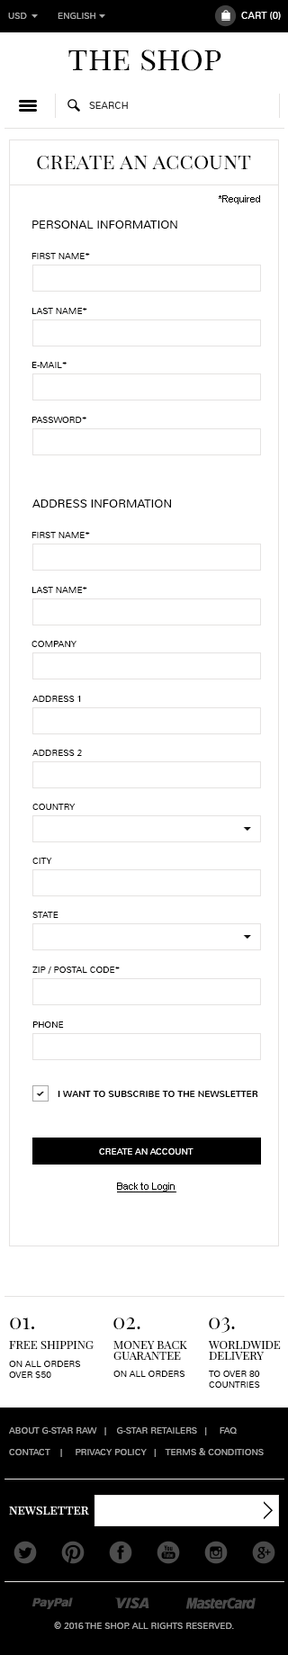
<style>
.page{position:relative;width:288px;height:1655px;background:#ffffff}
.page>*{position:absolute;margin:0}
.t1{font:9px "Nunito-Light";color:#aaaaaa;text-transform:uppercase}
.t2{font:9.9px "Nunito-Light";color:#ffffff;text-transform:uppercase}
.t3{font:32.4px "PlayfairDisplaySC-Regular";color:#000000}
.t4{font:9.9px "Nunito-Light";color:#282828;text-transform:uppercase}
.t5{font:21.6px "PlayfairDisplaySC-Regular";color:#000000}
.t6{font:9.9px "ArialMT";color:#000000}
.t7{font:11.7px "Nunito-Light";color:#000000;text-transform:uppercase}
.t8{font:9px "Nunito-Light";color:#000000;text-transform:uppercase}
.t9{font:9px "Nunito-Regular";color:#000000;text-transform:uppercase}
.t10{font:9px "Nunito-Light";color:#ffffff;text-transform:uppercase}
.t11{font:9.9px "ArialMT";color:#000000;text-decoration:underline}
.t12{font:11.7px "PlayfairDisplaySC-Regular";color:#000000;text-transform:uppercase}
.t13{font:11.7px/10.8px "PlayfairDisplaySC-Regular";color:#000000;text-transform:uppercase}
.t14{font:9px/21.6px "Nunito-Light";color:#aaaaaa;text-transform:uppercase}
.t15{font:12.6px "PlayfairDisplaySC-Regular";color:#ffffff}
</style>
<div class="page">
<p class="t1" style="left:8px;top:13px;width:19px;height:6px">usD</p>
<p class="t1" style="left:58px;top:13px;width:37px;height:6px">English</p>
<p class="t2" style="left:241px;top:12px;width:40px;height:8px">Cart (0)</p>
<p class="t3" style="left:68px;top:50px;width:153px;height:21px">the shop</p>
<p class="t4" style="left:89px;top:102px;width:39px;height:7px">search</p>
<p class="t5" style="left:37px;top:156px;width:214px;height:13px">create an account</p>
<p class="t6" style="left:219px;top:195px;width:41px;height:9px">*Required</p>
<p class="t7" style="left:32px;top:220px;width:145px;height:9px">personal information</p>
<p class="t8" style="left:32px;top:253px;width:58px;height:6px">first name*</p>
<p class="t8" style="left:32px;top:308px;width:55px;height:6px">last name*</p>
<p class="t8" style="left:32px;top:362px;width:35px;height:6px">e-mail*</p>
<p class="t8" style="left:32px;top:417px;width:54px;height:6px">password*</p>
<p class="t7" style="left:32px;top:500px;width:139px;height:8px">address information</p>
<p class="t8" style="left:32px;top:532px;width:58px;height:6px">first name*</p>
<p class="t8" style="left:32px;top:587px;width:55px;height:6px">last name*</p>
<p class="t8" style="left:32px;top:641px;width:44px;height:6px">company</p>
<p class="t8" style="left:32px;top:696px;width:49px;height:6px">Address 1</p>
<p class="t8" style="left:32px;top:750px;width:50px;height:6px">address 2</p>
<p class="t8" style="left:32px;top:804px;width:43px;height:6px">country</p>
<p class="t8" style="left:32px;top:858px;width:20px;height:6px">city</p>
<p class="t8" style="left:32px;top:912px;width:26px;height:6px">state</p>
<p class="t8" style="left:32px;top:967px;width:88px;height:7px">zip / postal code*</p>
<p class="t8" style="left:32px;top:1022px;width:32px;height:6px">Phone</p>
<p class="t9" style="left:58px;top:1091px;width:200px;height:6px">I want to subscribe to the newsletter</p>
<p class="t10" style="left:99px;top:1148px;width:95px;height:7px">create an account</p>
<p class="t11" style="left:117px;top:1183px;width:59px;height:9px">Back to Login</p>
<p class="t5" style="left:10px;top:1318px;width:24px;height:11px">01.</p>
<p class="t5" style="left:113px;top:1318px;width:27px;height:11px">02.</p>
<p class="t5" style="left:209px;top:1318px;width:26px;height:15px">03.</p>
<p class="t12" style="left:9px;top:1341px;width:85px;height:8px">Free Shipping</p>
<p class="t13" style="left:113px;top:1341px;width:74px;height:19px">Money back<br>guarantee</p>
<p class="t13" style="left:208px;top:1341px;width:73px;height:19px">Worldwide<br>Delivery</p>
<p class="t8" style="left:9px;top:1361px;width:72px;height:18px">On all orders<br>over $50</p>
<p class="t8" style="left:113px;top:1371px;width:72px;height:6px">On all orders</p>
<p class="t8" style="left:209px;top:1371px;width:51px;height:17px">To over 80<br>countries</p>
<p class="t14" style="left:9px;top:1427px;width:255px;height:30px">About G-Star Raw   |    G-Star Retailers   |     FAQ<br>Contact    |     Privacy Policy   |    Terms &amp; Conditions</p>
<p class="t15" style="left:9px;top:1507px;width:80px;height:8px">newsletter</p>
<p class="t1" style="left:54px;top:1622px;width:180px;height:7px">© 2016 the shop. All Rights Reserved.</p>
</div>
